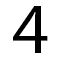
<style>
.page{position:relative;width:60px;height:60px;background:#ffffff}
.page>*{position:absolute;margin:0}
.t1{font:72px "MyriadPro-Regular";color:#000000}
</style>
<div class="page">
<p class="t1" style="left:13px;top:6px;width:35px;height:47px">4</p>
</div>
